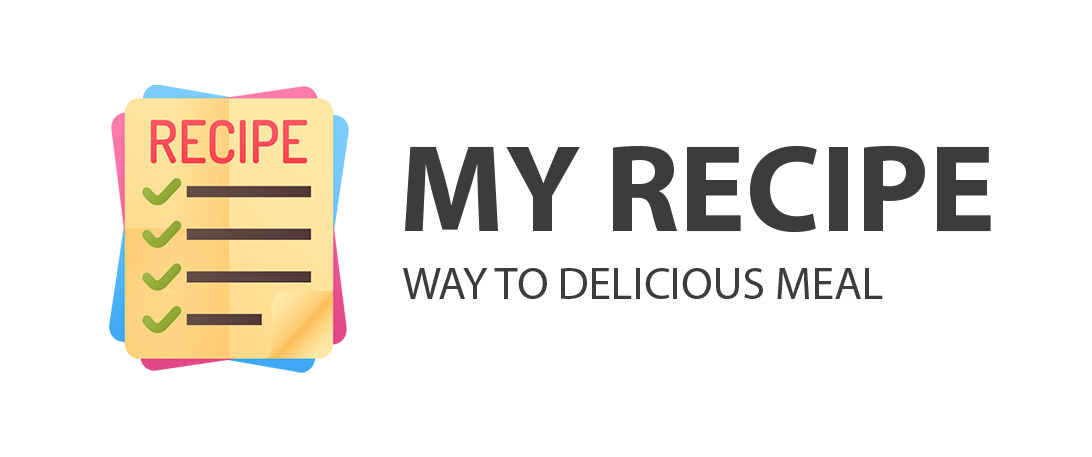
<style>
.page{position:relative;width:1092px;height:457px;background:#ffffff}
.page>*{position:absolute;margin:0}
.t1{font:125px "MyriadPro-Bold";color:#3c3c3b}
.t2{font:45.8px "MyriadPro-Regular";color:#3c3c3b}
</style>
<div class="page">
<p class="t1" style="left:405px;top:145px;width:586px;height:88px">MY RECIPE</p>
<p class="t2" style="left:403px;top:268px;width:480px;height:31px">WAY TO DELICIOUS MEAL</p>
</div>
